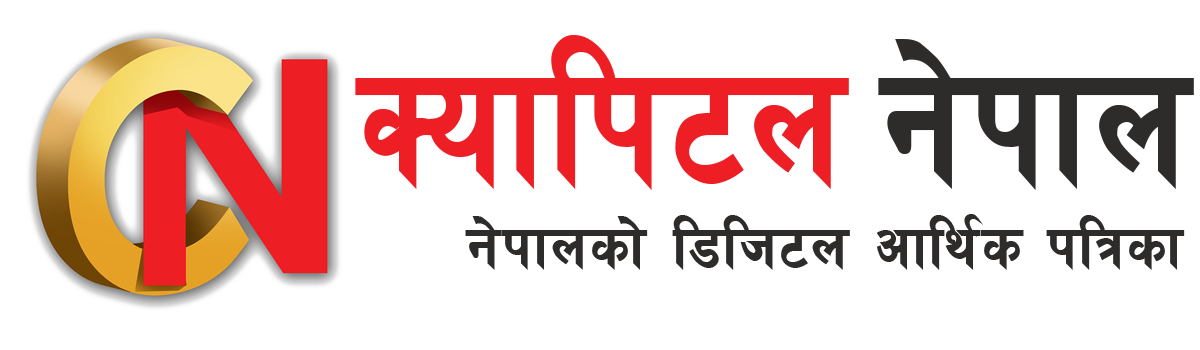
<style>
.page{position:relative;width:1200px;height:350px;background:#ffffff}
.page>*{position:absolute;margin:0}
.t1{font:195.8px "PreetiBold";letter-spacing:0.02em;color:#ed1f24;scale:0.92 1}
.t2{font:195.8px "PreetiBold";letter-spacing:0.02em;color:#2e2b2b;scale:0.92 1}
.t3{font:70.8px "PreetiBold";letter-spacing:0.02em;color:#2e2b2b}
</style>
<div class="page">
<p class="t1" style="left:355px;top:35px;width:839px;height:155px">Soflk6n <span class="t2">g]kfn</span></p>
<p class="t3" style="left:465px;top:214px;width:720px;height:56px">g]kfnsf] l8lh6n cfly{s klqsf</p>
</div>
